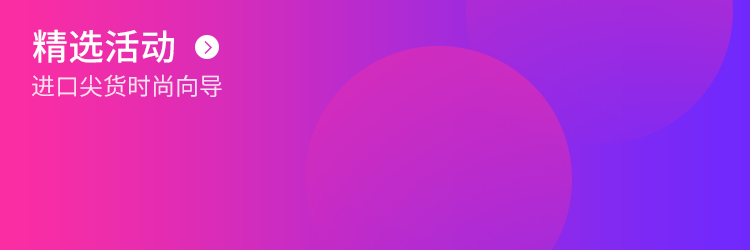
<style>
.page{position:relative;width:750px;height:250px}
.page>*{position:absolute;margin:0}
.t1{font:36px "SourceHanSansCN-Medium";color:#ffffff}
.t2{font:24px "SourceHanSansCN-Regular";color:#fbe0f0}
</style>
<div class="page">
<p class="t1" style="left:33px;top:29px;width:141px;height:34px">精选活动</p>
<p class="t2" style="left:32px;top:74px;width:190px;height:23px">进口尖货时尚向导</p>
</div>
